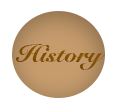
<style>
.page{position:relative;width:115px;height:107px;background:#ffffff}
.page>*{position:absolute;margin:0}
.t1{font:24px "SnellRoundhand-Black";color:#965c00}
</style>
<div class="page">
<p class="t1" style="left:15px;top:44px;width:90px;height:26px">History</p>
</div>
